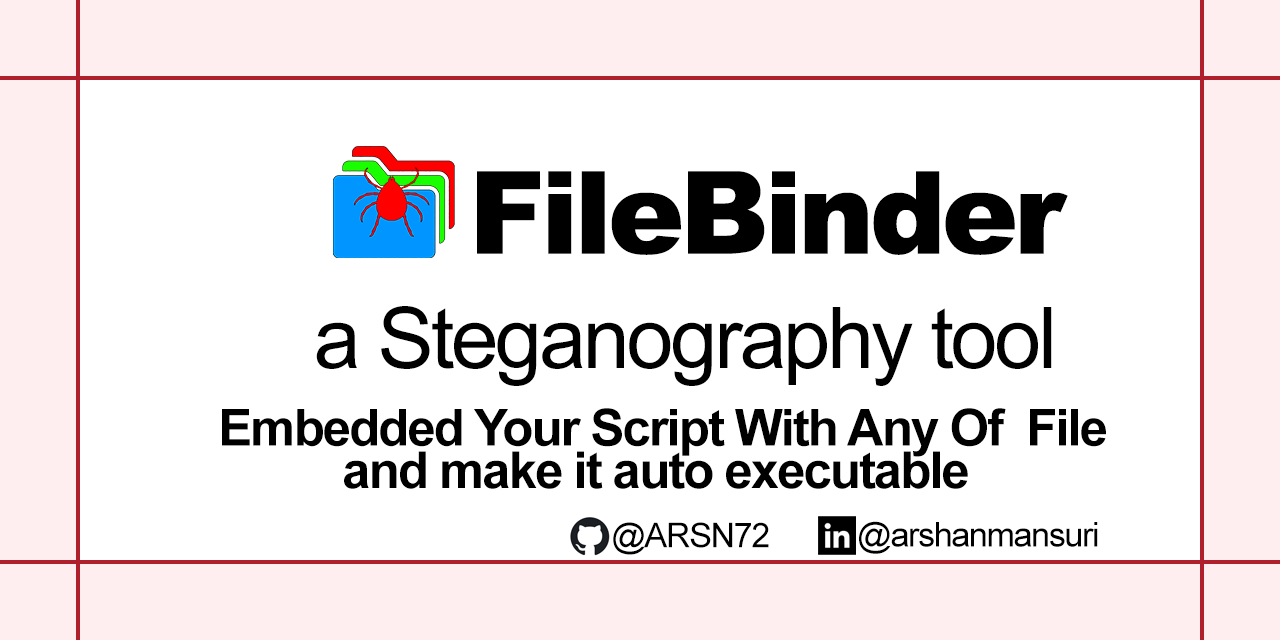
<style>
.page{position:relative;width:1280px;height:640px;background:#ffffff}
.page>*{position:absolute;margin:0}
.t1{font:114.7px "Arial-Black";letter-spacing:-0.04em;color:#000000}
.t2{font:85px "ArialMT";letter-spacing:-0.04em;color:#000000}
.t3{font:51px/42.5px "Arial-BoldMT";letter-spacing:-0.04em;color:#000000}
.t4{font:34.1px "ArialMT";letter-spacing:-0.04em;color:#000000}
</style>
<div class="page">
<p class="t1" style="left:477px;top:171px;width:591px;height:84px">FileBinder</p>
<p class="t2" style="left:316px;top:306px;width:736px;height:80px">a Steganography tool</p>
<p class="t3" style="left:222px;top:408px;width:884px;height:81px;text-align:center">Embedded Your Script With Any Of  File<br>and make it auto executable</p>
<p class="t4" style="left:859px;top:521px;width:239px;height:33px">@arshanmansuri</p>
<p class="t4" style="left:613px;top:522px;width:156px;height:33px">@ARSN72</p>
</div>
